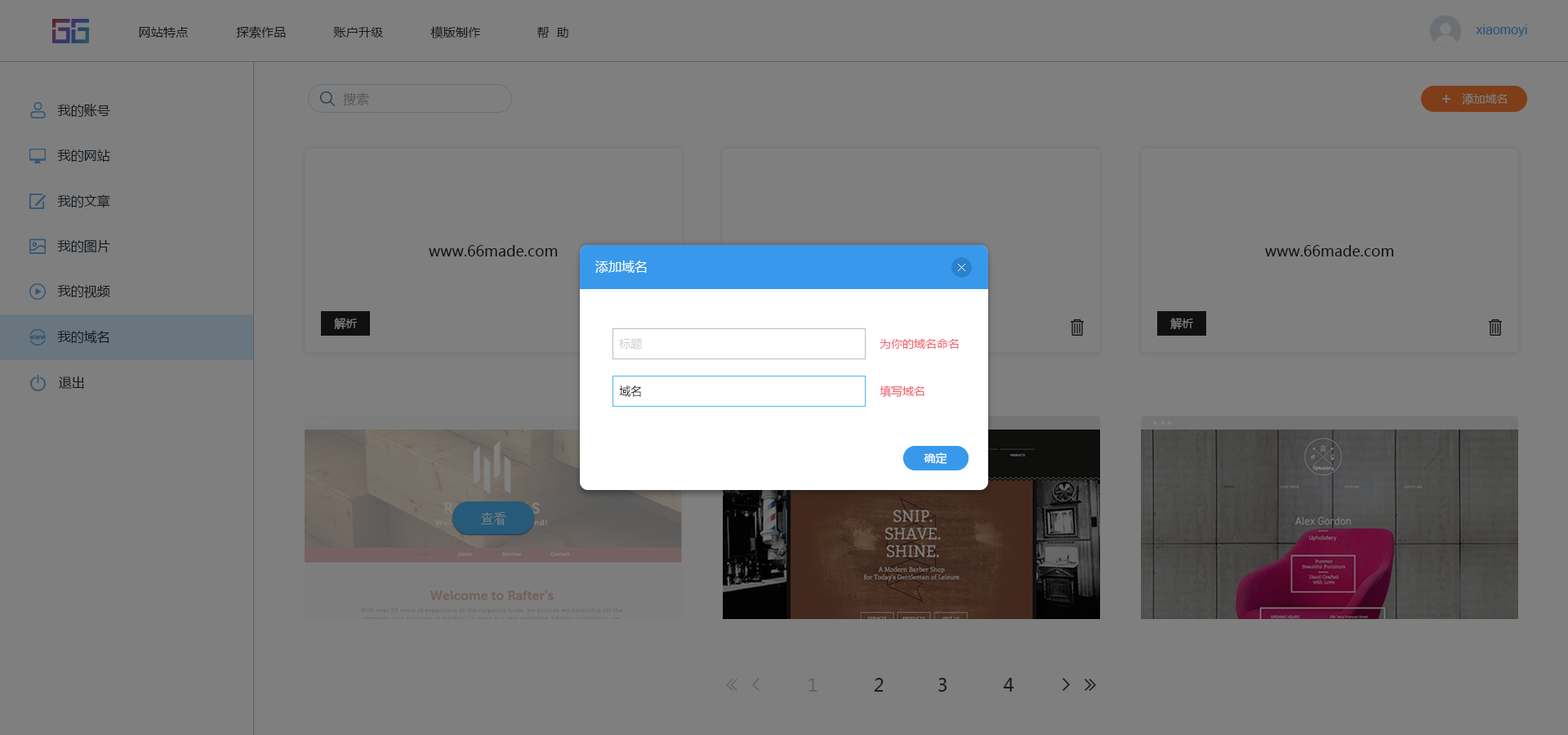
<style>
.page{position:relative;width:1568px;height:735px;background:#7f7f7f}
.page>*{position:absolute;margin:0}
.t1{font:12.4px "MicrosoftYaHei";color:#10181e}
.t2{font:13.1px "ArialMT";color:#2b5176}
.t3{font:13.1px "MicrosoftYaHei";color:#595959}
.t4{font:11.4px "MicrosoftYaHei";color:#7f7f7f}
.t5{font:13.1px "MicrosoftYaHei";color:#10181e}
.t6{font:14.7px "MicrosoftYaHei";color:#212121}
.t7{font:13.1px "MicrosoftYaHei";color:#ffffff}
.t8{font:11.4px "MicrosoftYaHei";color:#cccccc}
.t9{font:11.4px "MicrosoftYaHei";color:#f36069}
.t10{font:11.4px "MicrosoftYaHei";color:#212121}
.t11{font:11.4px "MicrosoftYaHei";color:#ffffff}
.t12{font:13.1px "SimSun";color:#7f7f7f}
.t13{font:18px "MicrosoftYaHei";color:#626567}
.t14{font:18px "MicrosoftYaHei";color:#171e24}
</style>
<div class="page">
<p class="t1" style="left:139px;top:27px;width:49px;height:11px">网站特点</p>
<p class="t1" style="left:236px;top:26px;width:50px;height:12px">探索作品</p>
<p class="t1" style="left:333px;top:27px;width:50px;height:11px">账户升级</p>
<p class="t1" style="left:430px;top:26px;width:51px;height:13px">模版制作</p>
<p class="t1" style="left:537px;top:26px;width:31px;height:12px">帮  助</p>
<p class="t2" style="left:1476px;top:24px;width:51px;height:13px">xiaomoyi</p>
<p class="t3" style="left:343px;top:92px;width:26px;height:13px">搜索</p>
<p class="t4" style="left:1462px;top:93px;width:45px;height:12px">添加域名</p>
<p class="t5" style="left:57px;top:104px;width:53px;height:13px">我的账号</p>
<p class="t5" style="left:57px;top:149px;width:53px;height:13px">我的网站</p>
<p class="t5" style="left:57px;top:194px;width:53px;height:14px">我的文章</p>
<p class="t5" style="left:57px;top:240px;width:53px;height:13px">我的图片</p>
<p class="t6" style="left:429px;top:245px;width:129px;height:11px">www.66made.com</p>
<p class="t6" style="left:1265px;top:245px;width:129px;height:11px">www.66made.com</p>
<p class="t7" style="left:595px;top:261px;width:52px;height:12px">添加域名</p>
<p class="t5" style="left:57px;top:285px;width:53px;height:13px">我的视频</p>
<p class="t4" style="left:334px;top:318px;width:24px;height:12px">解析</p>
<p class="t4" style="left:1170px;top:318px;width:24px;height:12px">解析</p>
<p class="t5" style="left:57px;top:331px;width:52px;height:12px">我的域名</p>
<p class="t8" style="left:619px;top:338px;width:23px;height:12px">标题</p>
<p class="t9" style="left:880px;top:339px;width:79px;height:10px">为你的域名命名</p>
<p class="t5" style="left:59px;top:376px;width:25px;height:13px">退出</p>
<p class="t10" style="left:619px;top:385px;width:22px;height:12px">域名</p>
<p class="t9" style="left:880px;top:385px;width:44px;height:13px">填写域名</p>
<p class="t11" style="left:924px;top:452px;width:23px;height:12px">确定</p>
<p class="t11" style="left:924px;top:452px;width:23px;height:12px">确定</p>
<p class="t12" style="left:481px;top:512px;width:25px;height:13px">查看</p>
<p class="t13" style="left:808px;top:678px;width:9px;height:14px">1</p>
<p class="t14" style="left:874px;top:678px;width:10px;height:14px">2</p>
<p class="t14" style="left:938px;top:678px;width:9px;height:14px">3</p>
<p class="t14" style="left:1003px;top:678px;width:10px;height:14px">4</p>
</div>
